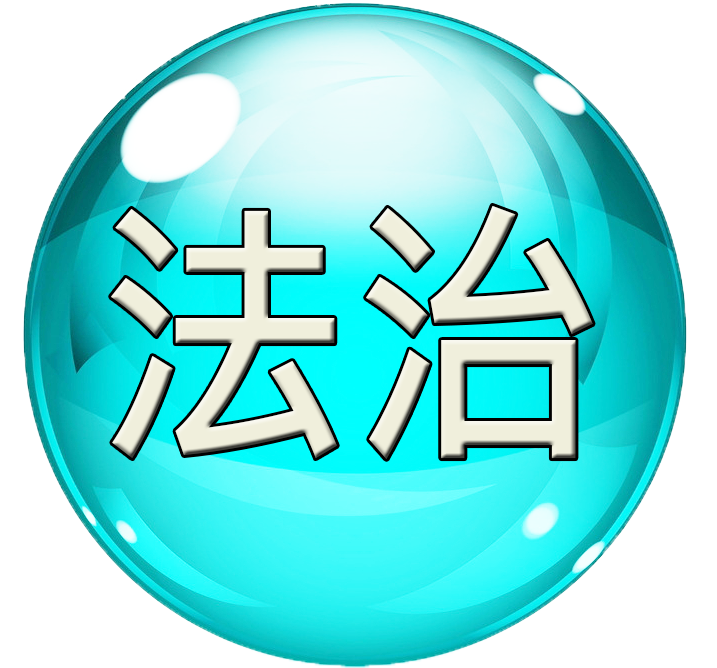
<style>
.page{position:relative;width:717px;height:668px;background:#ffffff}
.page>*{position:absolute;margin:0}
.t1{font:283.1px "MicrosoftJhengHeiBold";color:#f0efdc;scale:0.9 1}
</style>
<div class="page">
<p class="t1" style="left:111px;top:205px;width:482px;height:254px">法治</p>
</div>
